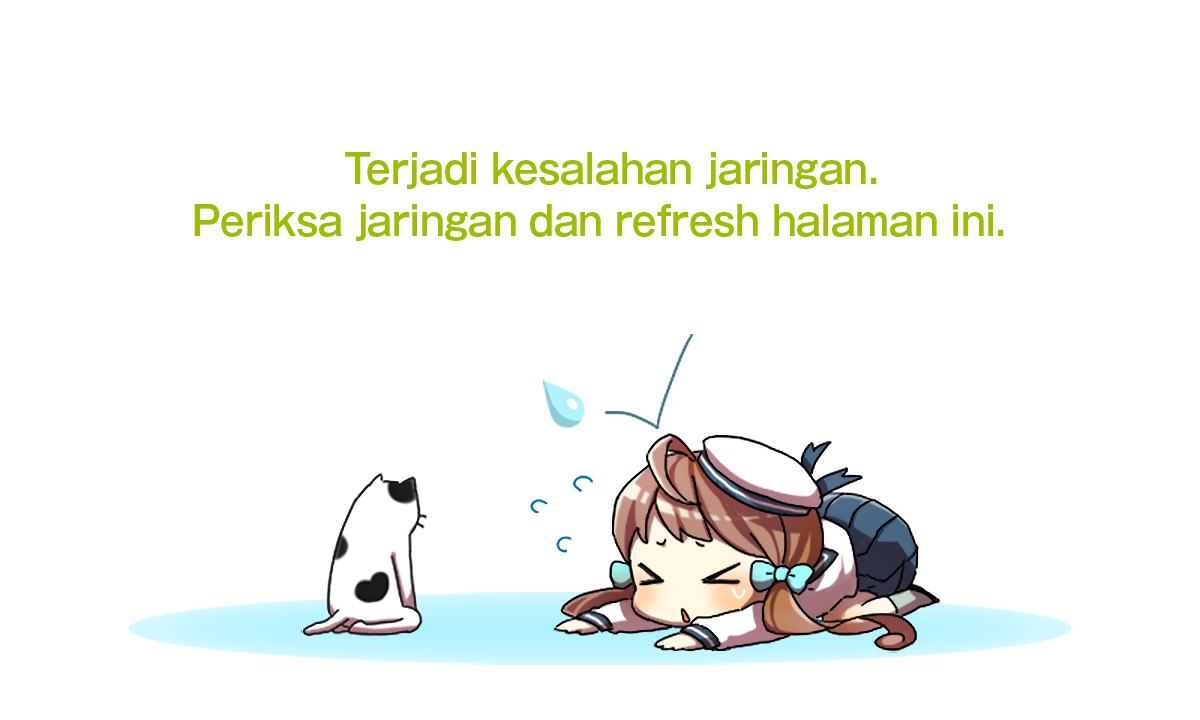
<style>
.page{position:relative;width:1200px;height:720px;background:#ffffff}
.page>*{position:absolute;margin:0}
.t1{font:40px/52px "GothicMB101Pro-DeBold";color:#9fbc00;scale:0.9 1}
</style>
<div class="page">
<p class="t1" style="left:194px;top:152px;width:810px;height:89px;text-align:center">Terjadi kesalahan jaringan.<br>Periksa jaringan dan refresh halaman ini.</p>
</div>
